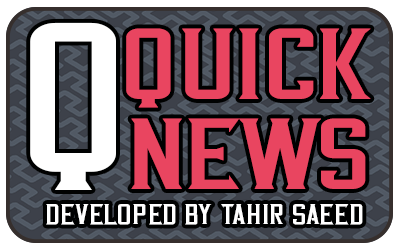
<style>
.page{position:relative;width:400px;height:250px;background:#ffffff}
.page>*{position:absolute;margin:0}
.t1{font:211.8px "VintageWhiskey-Regular";color:#ffffff;scale:1.32 1}
.t2{font:100px/90px "VintageWhiskey-Regular";letter-spacing:-0.05em;color:#e94560;font-weight:bold;scale:1.43 1}
.t3{font:28.6px "VintageWhiskey-Regular";color:#ffffff;scale:1.32 1}
</style>
<div class="page">
<p class="t1" style="left:30px;top:22px;width:86px;height:168px">Q</p>
<p class="t2" style="left:126px;top:28px;width:245px;height:161px;text-align:center">Quick<br>NEWS</p>
<p class="t3" style="left:46px;top:204px;width:317px;height:21px">developed by tahir saeed</p>
</div>
